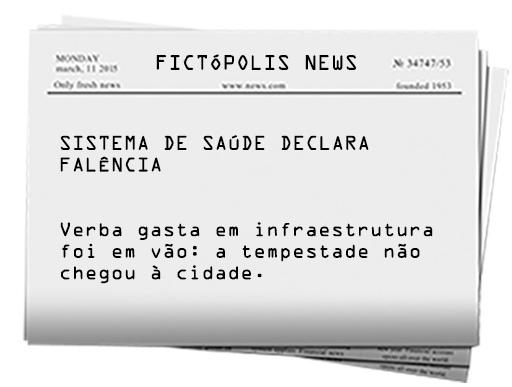
<style>
.page{position:relative;width:512px;height:387px;background:#ededed}
.page>*{position:absolute;margin:0}
.t1{font:18.8px "OCRAStd";color:#000000}
.t2{font:18px "OCRAStd";color:#000000}
</style>
<div class="page">
<p class="t1" style="left:156px;top:54px;width:200px;height:16px">FICTÓPOLIS NEWS</p>
<p class="t2" style="left:60px;top:135px;width:373px;height:149px">SISTEMA DE SAÚDE DECLARA <br>FALÊNCIA<br><br><br>Verba gasta em infraestrutura <br>foi em vão: a tempestade não <br>chegou à cidade.</p>
</div>
